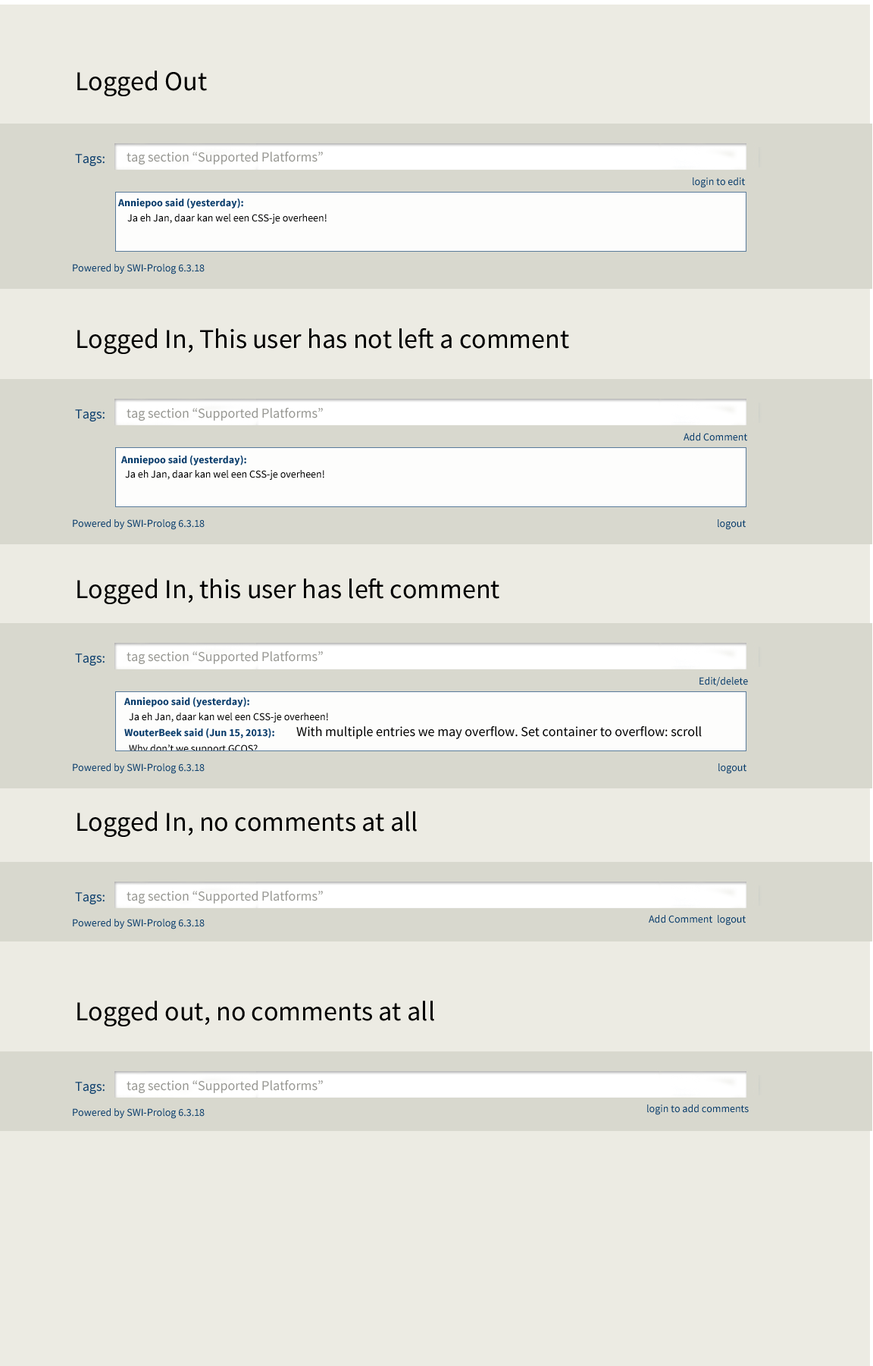
<style>
.page{position:relative;width:873px;height:1366px;background:#ecebe3}
.page>*{position:absolute;margin:0}
.t1{font:27.3px "SourceSansPro-Regular";color:#000000}
.t2{font:13.6px "SourceSansPro-Regular";color:#0a3d6c}
.t3{font:13.6px "SourceSansPro-Regular";color:#979792}
.t4{font:10.6px "SourceSansPro-Regular";color:#0a3d6c}
.t5{font:10.6px "SourceSansPro-Bold";color:#0a3d6c}
.t6{font:10.6px "SourceSansPro-Regular";color:#000000}
.t7{font:13.6px "SourceSansPro-Regular";color:#000000}
</style>
<div class="page">
<p class="t1" style="left:77px;top:70px;width:130px;height:26px">Logged Out</p>
<p class="t2" style="left:75px;top:154px;width:30px;height:12px">Tags:</p>
<p class="t3" style="left:127px;top:152px;width:196px;height:12px">tag section “Supported Platforms”</p>
<p class="t4" style="left:693px;top:177px;width:52px;height:11px">login to edit</p>
<p class="t5" style="left:118px;top:198px;width:125px;height:10px">Anniepoo said (yesterday):</p>
<p class="t6" style="left:127px;top:214px;width:200px;height:10px">Ja eh Jan, daar kan wel een CSS-je overheen!</p>
<p class="t4" style="left:73px;top:264px;width:132px;height:10px">Powered by SWI-Prolog 6.3.18</p>
<p class="t1" style="left:77px;top:328px;width:492px;height:26px">Logged In, This user has not left a comment</p>
<p class="t2" style="left:75px;top:409px;width:30px;height:12px">Tags:</p>
<p class="t3" style="left:127px;top:408px;width:196px;height:13px">tag section “Supported Platforms”</p>
<p class="t4" style="left:684px;top:433px;width:63px;height:8px">Add Comment</p>
<p class="t5" style="left:121px;top:455px;width:125px;height:10px">Anniepoo said (yesterday):</p>
<p class="t6" style="left:125px;top:470px;width:199px;height:10px">Ja eh Jan, daar kan wel een CSS-je overheen!</p>
<p class="t4" style="left:73px;top:519px;width:132px;height:11px">Powered by SWI-Prolog 6.3.18</p>
<p class="t4" style="left:718px;top:519px;width:28px;height:11px">logout</p>
<p class="t1" style="left:77px;top:578px;width:422px;height:26px">Logged In, this user has left comment</p>
<p class="t2" style="left:75px;top:653px;width:30px;height:12px">Tags:</p>
<p class="t3" style="left:127px;top:651px;width:196px;height:13px">tag section “Supported Platforms”</p>
<p class="t4" style="left:700px;top:677px;width:48px;height:10px">Edit/delete</p>
<p class="t5" style="left:124px;top:697px;width:125px;height:10px">Anniepoo said (yesterday):</p>
<p class="t6" style="left:129px;top:712px;width:199px;height:10px">Ja eh Jan, daar kan wel een CSS-je overheen!</p>
<p class="t5" style="left:124px;top:728px;width:150px;height:10px">WouterBeek said (Jun 15, 2013):</p>
<p class="t7" style="left:296px;top:726px;width:406px;height:13px">With multiple entries we may overflow. Set container to overflow: scroll</p>
<p class="t4" style="left:73px;top:763px;width:132px;height:11px">Powered by SWI-Prolog 6.3.18</p>
<p class="t4" style="left:718px;top:763px;width:29px;height:11px">logout</p>
<p class="t1" style="left:77px;top:811px;width:340px;height:26px">Logged In, no comments at all</p>
<p class="t2" style="left:75px;top:892px;width:30px;height:12px">Tags:</p>
<p class="t3" style="left:127px;top:891px;width:196px;height:12px">tag section “Supported Platforms”</p>
<p class="t4" style="left:649px;top:915px;width:63px;height:8px">Add Comment</p>
<p class="t4" style="left:718px;top:915px;width:28px;height:10px">logout</p>
<p class="t4" style="left:73px;top:919px;width:132px;height:10px">Powered by SWI-Prolog 6.3.18</p>
<p class="t1" style="left:77px;top:1000px;width:357px;height:26px">Logged out, no comments at all</p>
<p class="t2" style="left:75px;top:1082px;width:30px;height:12px">Tags:</p>
<p class="t3" style="left:127px;top:1080px;width:196px;height:13px">tag section “Supported Platforms”</p>
<p class="t4" style="left:73px;top:1108px;width:132px;height:11px">Powered by SWI-Prolog 6.3.18</p>
<p class="t4" style="left:647px;top:1104px;width:102px;height:11px">login to add comments</p>
</div>
